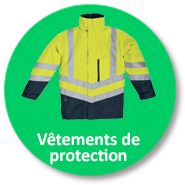
<style>
.page{position:relative;width:185px;height:185px;background:#00cc66}
.page>*{position:absolute;margin:0}
.t1{font:18px/16px "Calibri-Bold";color:#ffffff}
</style>
<div class="page">
<p class="t1" style="left:37px;top:132px;width:103px;height:33px;text-align:center">Vêtements de  <br>protection</p>
</div>
